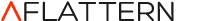
<style>
.page{position:relative;width:200px;height:21px;background:#ffffff}
.page>*{position:absolute;margin:0}
.t1{font:30px "Hero";color:#fa2f07;font-weight:bold}
.t2{font:30px "Hero";color:#1b1b1b}
</style>
<div class="page">
<p class="t1" style="left:1px;top:1px;width:21px;height:20px;rotate:180deg">V</p>
<p class="t2" style="left:24px;top:1px;width:72px;height:20px">FLAT</p>
<p class="t2" style="left:98px;top:1px;width:76px;height:20px">TERN</p>
</div>
